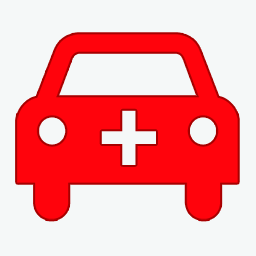
<style>
.page{position:relative;width:256px;height:256px;background:#f5f8f8}
.page>*{position:absolute;margin:0}
.t1{font:102.4px "Helvetica-Bold";color:#f5f8f8}
</style>
<div class="page">
<p class="t1" style="left:101px;top:110px;width:55px;height:55px">+</p>
</div>
